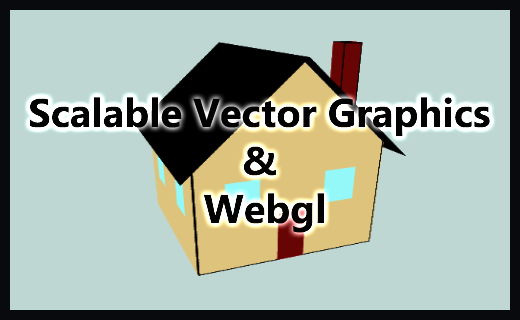
<style>
.page{position:relative;width:520px;height:320px;background:#bed7d3}
.page>*{position:absolute;margin:0}
.t1{font:40px "Gadugi-Bold";color:#020202}
</style>
<div class="page">
<p class="t1" style="left:30px;top:97px;width:460px;height:136px;text-align:center">Scalable Vector Graphics <br>&amp; <br>Webgl</p>
</div>
